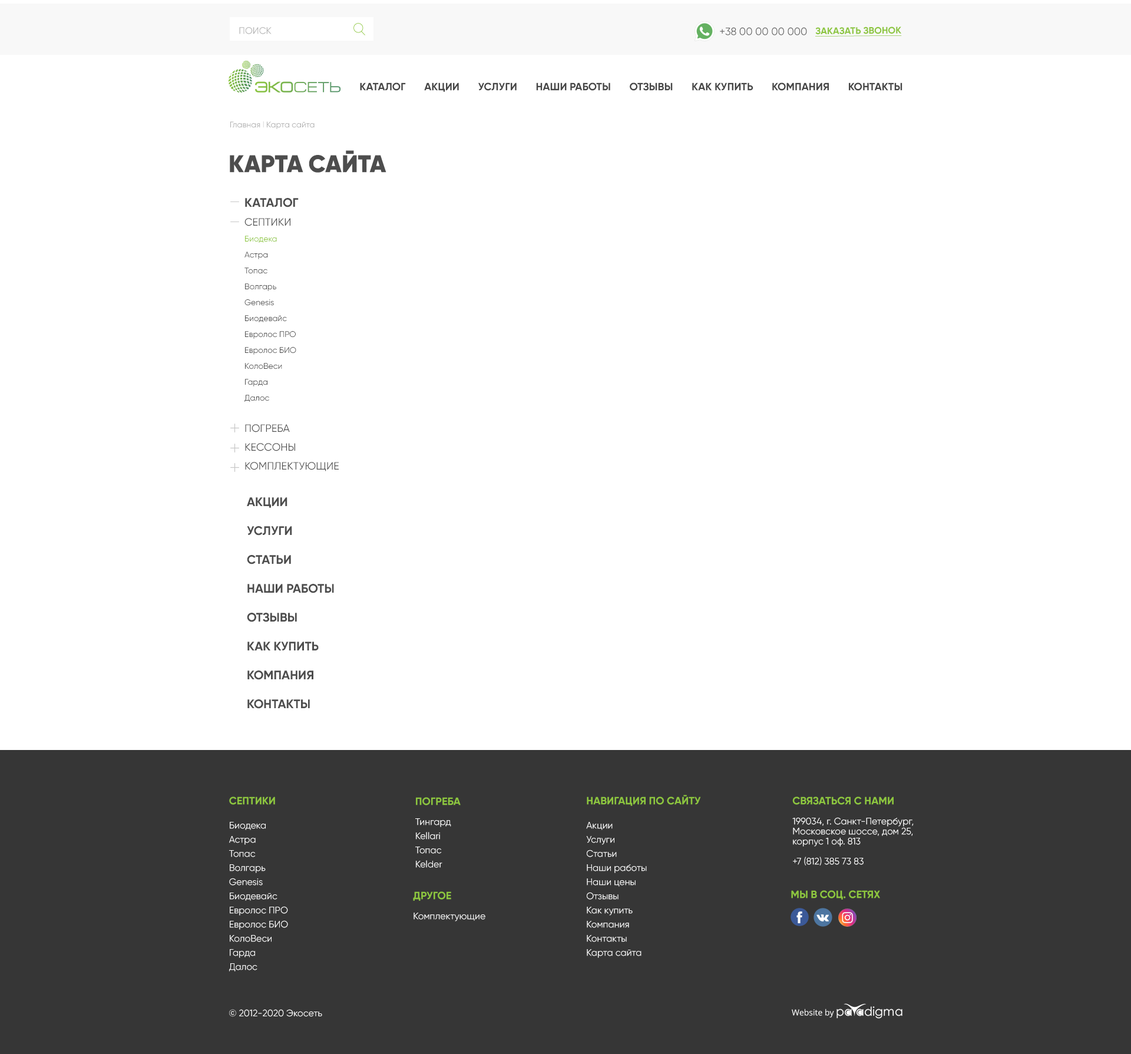
<style>
.page{position:relative;width:1131px;height:1054px;background:#ffffff}
.page>*{position:absolute;margin:0}
.t1{font:9.4px "Gilroy-Regular";color:#b1b1b1;text-transform:uppercase}
.t2{font:10.6px "Gilroy-Regular";color:#636363;text-transform:uppercase}
.t3{font:9.4px "Gilroy-Bold";color:#8dc63f;text-transform:uppercase;text-decoration:underline}
.t4{font:10.6px "Gilroy-Bold";color:#464646;text-transform:uppercase}
.t5{font:8.2px "Gilroy-Regular";color:#acacac}
.t6{font:8.2px "Gilroy-Regular";color:#d7d7d7}
.t7{font:24.2px "Gilroy-Black";color:#4c4c4c;text-transform:uppercase}
.t8{font:8.2px/15.9px "Gilroy-Regular";color:#4c4c4c}
.t9{font:12.4px/18.9px "Gilroy-Bold";color:#4d4d4d;text-transform:uppercase}
.t10{font:10.6px/18.9px "Gilroy-Regular";color:#4d4d4d;text-transform:uppercase}
.t11{font:8.2px/15.9px "Gilroy-Regular";color:#8dc63f}
.t12{font:12.4px/28.9px "Gilroy-Bold";color:#4d4d4d;text-transform:uppercase}
.t13{font:9.4px/14.1px "Gilroy-Regular";color:#ffffff}
.t14{font:10.6px/10px "Gilroy-Bold";color:#8dc63f;text-transform:uppercase}
.t15{font:9.4px/10px "Gilroy-Regular";color:#ffffff}
.t16{font:10.6px/24.2px "Gilroy-Bold";color:#ffffff;text-transform:uppercase}
.t17{font:10.6px "Gilroy-Bold";color:#8dc63f;text-transform:uppercase}
.t18{font:10.6px "Gilroy-Bold";color:#ffffff;text-transform:uppercase}
.t19{font:9.4px "Gilroy-Regular";color:#ffffff}
.t20{font:8.2px "OpenSans";color:#ffffff}
</style>
<div class="page">
<p class="t1" style="left:239px;top:27px;width:33px;height:7px">поиск</p>
<p class="t2" style="left:720px;top:27px;width:87px;height:8px">+38 00 00 00 000</p>
<p class="t3" style="left:815px;top:27px;width:87px;height:10px;rotate:-1deg">заказать звонок</p>
<p class="t4" style="left:360px;top:82px;width:543px;height:10px">Каталог       Акции       Услуги       Наши работы       отзывы       Как купить       Компания       Контакты</p>
<p class="t5" style="left:230px;top:121px;width:85px;height:8px">Главная <span class="t6">l </span>Карта сайта</p>
<p class="t7" style="left:230px;top:150px;width:157px;height:23px">карта сайта</p>
<p class="t8" style="left:245px;top:198px;width:94px;height:273px"><span class="t9">Каталог<br></span><span class="t10">Септики<br></span><span class="t11">Биодека <br></span>Астра <br>Топас <br>Волгарь <br>Genesis <br>Биодевайс <br>Евролос ПРО <br>Евролос БИО <br>КолоВеси <br>Гарда <br>Далос<br><br><span class="t10">Погреба<br>Кессоны<br>Комплектующие</span></p>
<p class="t12" style="left:247px;top:497px;width:87px;height:212px">Акции<br>Услуги<br>Статьи<br>Наши работы<br>Отзывы<br>Как купить <br>Компания<br>Контакты</p>
<p class="t13" style="left:229px;top:797px;width:59px;height:175px"><span class="t14">Септики<br><br></span>Биодека <br>Астра <br>Топас <br>Волгарь <br>Genesis <br>Биодевайс <br>Евролос ПРО <br>Евролос БИО <br>КолоВеси <br>Гарда <br>Далос</p>
<p class="t13" style="left:415px;top:797px;width:46px;height:71px"><span class="t14">погреба<br></span><span class="t15"><br>Тингард<br></span>Kellari<br>Топас<br>Kelder</p>
<p class="t13" style="left:586px;top:795px;width:115px;height:163px"><span class="t16"><br></span><span class="t14">навигация по сайту<br></span><span class="t15"><br>Акции   </span>    <br>Услуги       <br>Статьи       <br>Наши работы <br>Наши цены<br>Отзывы      <br>Как купить       <br>Компания       <br>Контакты<br>Карта сайта</p>
<p class="t15" style="left:792px;top:797px;width:122px;height:69px"><span class="t16"><br></span><span class="t14">связаться с нами <br></span><br>199034, г. Санкт-Петербург, <br>Московское шоссе, дом 25, <br>корпус 1 оф. 813<br><br>+7 (812) 385 73 83</p>
<p class="t15" style="left:413px;top:891px;width:72px;height:31px"><span class="t16"><br></span><span class="t14">Другое<br></span><br>Комплектующие</p>
<p class="t17" style="left:791px;top:890px;width:89px;height:10px"><span class="t18"><br></span>мы в соц. сетях</p>
<p class="t19" style="left:229px;top:1009px;width:93px;height:8px">© 2012-2020 Экосеть</p>
<p class="t20" style="left:792px;top:1009px;width:42px;height:9px">Website by</p>
</div>
